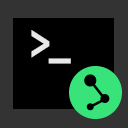
<style>
.page{position:relative;width:128px;height:128px;background:#000000}
.page>*{position:absolute;margin:0}
.t1{font:46px "SourceCodePro-Bold";letter-spacing:0.05em;color:#e8e8e8}
</style>
<div class="page">
<p class="t1" style="left:31px;top:30px;width:19px;height:28px">&gt;</p>
<p class="t1" style="left:48px;top:58px;width:23px;height:6px">_</p>
</div>
